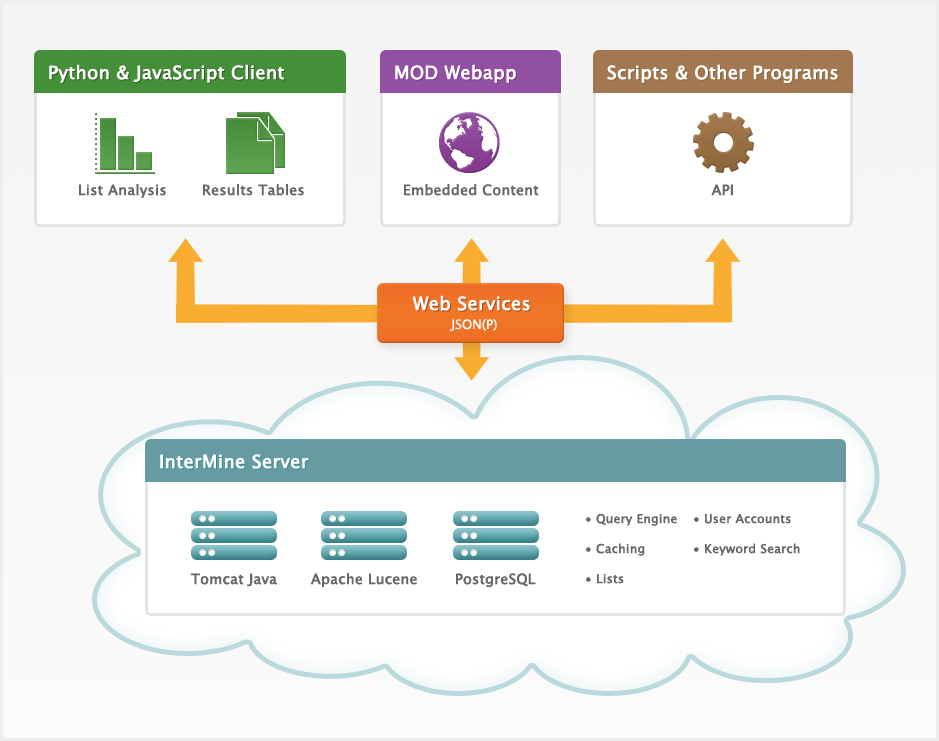
<style>
.page{position:relative;width:939px;height:741px;background:#ffffff}
.page>*{position:absolute;margin:0}
.t1{font:18px "LucidaGrande";color:#ffffff;font-weight:bold}
.t2{font:18px "LucidaGrande";font-weight:bold}
.t3{font:14px "LucidaGrande";color:#676767;font-weight:bold}
.t4{font:13px "LucidaGrande";color:#ffffff}
.t5{font:12px/30px "LucidaGrande";color:#676767;font-weight:bold}
</style>
<div class="page">
<p class="t1" style="left:49px;top:64px;width:235px;height:19px">Python &amp; JavaScript Client</p>
<p class="t2" style="left:50px;top:65px;width:235px;height:19px">Python &amp; JavaScript Client</p>
<p class="t1" style="left:395px;top:64px;width:121px;height:19px">MOD Webapp</p>
<p class="t2" style="left:396px;top:65px;width:121px;height:19px">MOD Webapp</p>
<p class="t1" style="left:607px;top:64px;width:231px;height:19px">Scripts &amp; Other Programs</p>
<p class="t2" style="left:608px;top:65px;width:231px;height:19px">Scripts &amp; Other Programs</p>
<p class="t3" style="left:79px;top:184px;width:87px;height:14px">List Analysis</p>
<p class="t3" style="left:203px;top:184px;width:101px;height:12px">Results Tables</p>
<p class="t3" style="left:404px;top:184px;width:135px;height:12px">Embedded Content</p>
<p class="t3" style="left:711px;top:184px;width:22px;height:12px">API</p>
<p class="t1" style="left:412px;top:295px;width:118px;height:16px">Web Services</p>
<p class="t2" style="left:413px;top:296px;width:118px;height:16px">Web Services</p>
<p class="t4" style="left:449px;top:318px;width:48px;height:13px">JSON(P)</p>
<p class="t1" style="left:160px;top:454px;width:149px;height:15px">InterMine Server</p>
<p class="t2" style="left:161px;top:455px;width:149px;height:15px">InterMine Server</p>
<p class="t5" style="left:586px;top:513px;width:214px;height:71px">• Query Engine • User Accounts<br>• Caching  • Keyword Search<br>• Lists</p>
<p class="t3" style="left:190px;top:573px;width:87px;height:14px">Tomcat Java</p>
<p class="t3" style="left:310px;top:573px;width:107px;height:14px">Apache Lucene</p>
<p class="t3" style="left:456px;top:573px;width:80px;height:15px">PostgreSQL</p>
</div>
